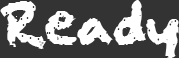
<style>
.page{position:relative;width:179px;height:58px;background:#333333}
.page>*{position:absolute;margin:0}
.t1{font:50px "squeakychalksound";color:#ffffff}
</style>
<div class="page">
<p class="t1" style="left:0px;top:0px;width:179px;height:58px">Ready</p>
</div>
